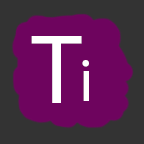
<style>
.page{position:relative;width:144px;height:144px;background:#6e045e}
.page>*{position:absolute;margin:0}
.t1{font:100px "MyriadPro-Regular";color:#ffffff}
.t2{font:60px "MyriadPro-Regular";color:#ffffff}
</style>
<div class="page">
<p class="t1" style="left:31px;top:36px;width:51px;height:67px">T</p>
<p class="t2" style="left:82px;top:60px;width:7px;height:41px">i</p>
</div>
